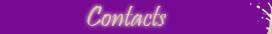
<style>
.page{position:relative;width:272px;height:34px;background:#780a93}
.page>*{position:absolute;margin:0}
.t1{font:30px "Pristina-Regular";color:#dec9ab}
</style>
<div class="page">
<p class="t1" style="left:87px;top:6px;width:80px;height:20px">Contacts</p>
</div>
